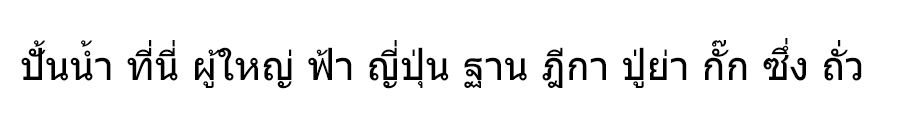
<style>
.page{position:relative;width:900px;height:140px;background:#ffffff}
.page>*{position:absolute;margin:0}
.t1{font:40px "Tahoma";color:#000000}
</style>
<div class="page">
<p class="t1" style="left:21px;top:38px;width:841px;height:51px">ปั้นน้ำ ที่นี่ ผู้ใหญ่ ฟ้า ญี่ปุ่น ฐาน ฎีกา ปู่ย่า กั๊ก ซึ่ง ถั่ว</p>
</div>
